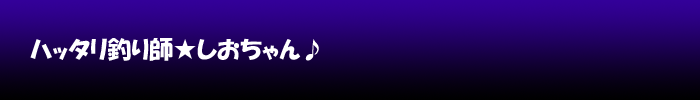
<style>
.page{position:relative;width:700px;height:100px}
.page>*{position:absolute;margin:0}
.t1{font:24px "HGPSoeiKakupoptai";color:#ffffff}
</style>
<div class="page">
<p class="t1" style="left:30px;top:38px;width:289px;height:23px">ハッタリ釣り師★しおちゃん♪</p>
</div>
